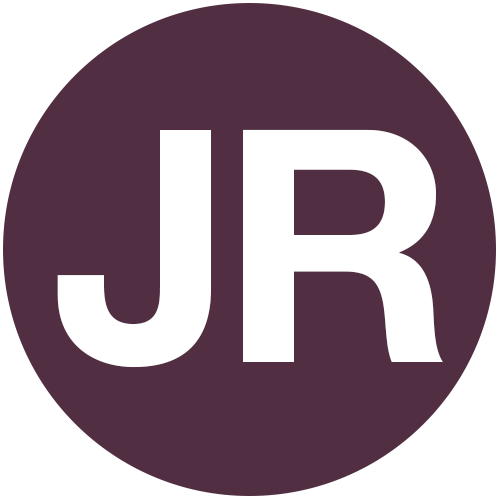
<style>
.page{position:relative;width:500px;height:500px;background:#512e41}
.page>*{position:absolute;margin:0}
.t1{font:325px "HelveticaNeueLTStd-Bd";letter-spacing:-0.04em;color:#ffffff}
</style>
<div class="page">
<p class="t1" style="left:57px;top:129px;width:386px;height:239px">JR</p>
</div>
